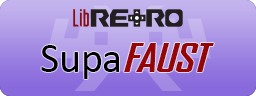
<style>
.page{position:relative;width:256px;height:96px}
.page>*{position:absolute;margin:0}
.t1{font:42px "SNES-Italic";letter-spacing:-0.01em;color:#960606;scale:1.5 1}
.t2{font:42px "Calibri";letter-spacing:-0.01em;color:#000000}
</style>
<div class="page">
<p class="t1" style="left:41px;top:43px;width:173px;height:36px"><span class="t2">Supa</span>Faust</p>
</div>
